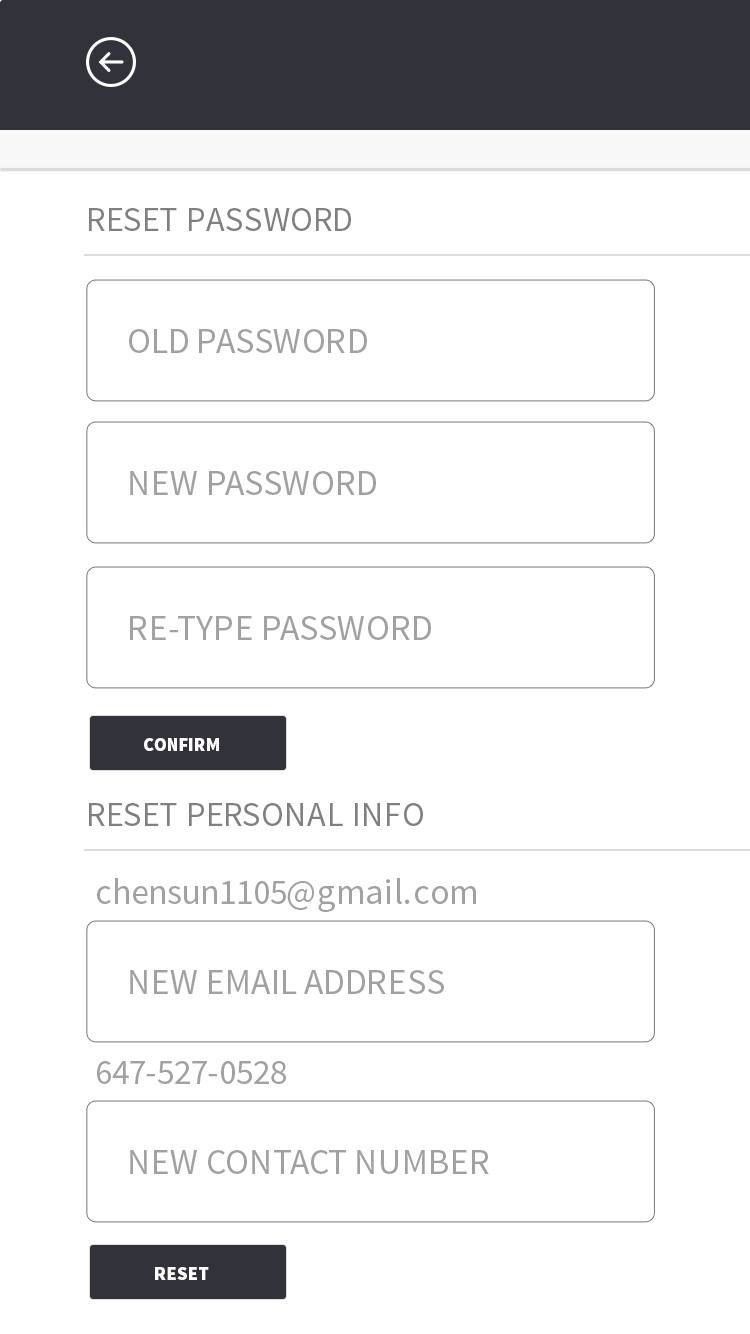
<style>
.page{position:relative;width:750px;height:1334px;background:#ffffff}
.page>*{position:absolute;margin:0}
.t1{font:34.6px "SourceSansPro-Regular";color:#808080}
.t2{font:35.9px "SourceSansPro-Regular";color:#a1a1a1}
.t3{font:18.5px "SourceSansPro-Black";color:#ffffff}
</style>
<div class="page">
<p class="t1" style="left:89px;top:208px;width:262px;height:23px">RESET PASSWORD</p>
<p class="t2" style="left:129px;top:329px;width:238px;height:24px">OLD PASSWORD</p>
<p class="t2" style="left:130px;top:471px;width:246px;height:24px">NEW PASSWORD</p>
<p class="t2" style="left:130px;top:616px;width:301px;height:24px">RE-TYPE PASSWORD</p>
<p class="t3" style="left:144px;top:738px;width:75px;height:13px">CONFIRM</p>
<p class="t1" style="left:89px;top:803px;width:334px;height:23px">RESET PERSONAL INFO</p>
<p class="t2" style="left:97px;top:878px;width:379px;height:34px">chensun1105@gmail.com</p>
<p class="t2" style="left:130px;top:970px;width:314px;height:24px">NEW EMAIL ADDRESS</p>
<p class="t2" style="left:97px;top:1061px;width:189px;height:23px">647-527-0528</p>
<p class="t2" style="left:130px;top:1150px;width:359px;height:24px">NEW CONTACT NUMBER</p>
<p class="t3" style="left:155px;top:1267px;width:54px;height:13px">RESET</p>
</div>
